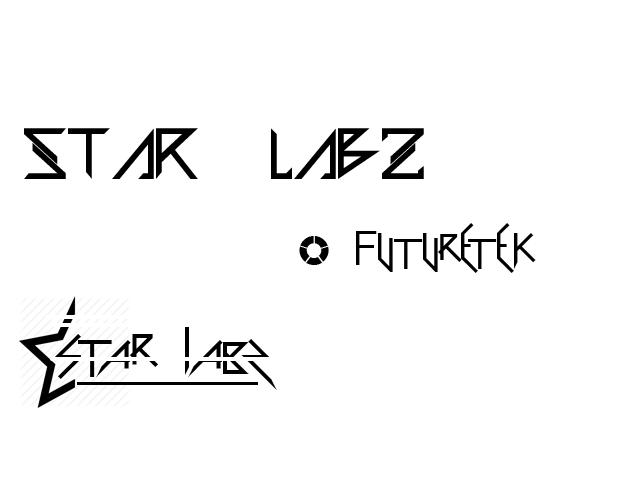
<style>
.page{position:relative;width:640px;height:480px;background:#ffffff}
.page>*{position:absolute;margin:0}
.t1{font:72px "TRG-Zilap";color:#000000}
.t2{font:72px "ScaryGlyphsandNiceCharacters";color:#000000}
.t3{font:86.3px "ScaryGlyphsandNiceCharacters";color:#000000}
</style>
<div class="page">
<p class="t1" style="left:24px;top:128px;width:400px;height:51px">star labz</p>
<p class="t2" style="left:299px;top:223px;width:237px;height:50px">#futuretek</p>
<p class="t3" style="left:52px;top:327px;width:225px;height:63px">star labz</p>
</div>
